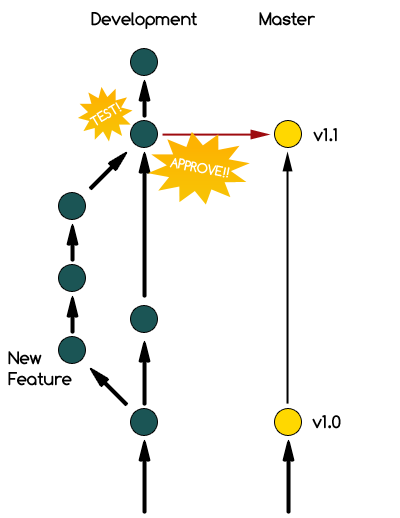
<style>
.page{position:relative;width:400px;height:518px;background:#ffffff}
.page>*{position:absolute;margin:0}
.t1{font:18px "Comfortaa-Bold";color:#000000}
.t2{font:14px "Comfortaa-Bold";color:#ffffff}
</style>
<div class="page">
<p class="t1" style="left:91px;top:12px;width:106px;height:17px">Development</p>
<p class="t1" style="left:259px;top:12px;width:56px;height:14px">Master</p>
<p class="t2" style="left:89px;top:102px;width:33px;height:24px;rotate:-30deg">TEST!</p>
<p class="t1" style="left:313px;top:128px;width:24px;height:14px">v1.1</p>
<p class="t2" style="left:169px;top:158px;width:61px;height:20px;rotate:11deg">APPROVE!!</p>
<p class="t1" style="left:8px;top:351px;width:64px;height:35px">New<br>Feature</p>
<p class="t1" style="left:312px;top:415px;width:29px;height:14px">v1.0</p>
</div>
